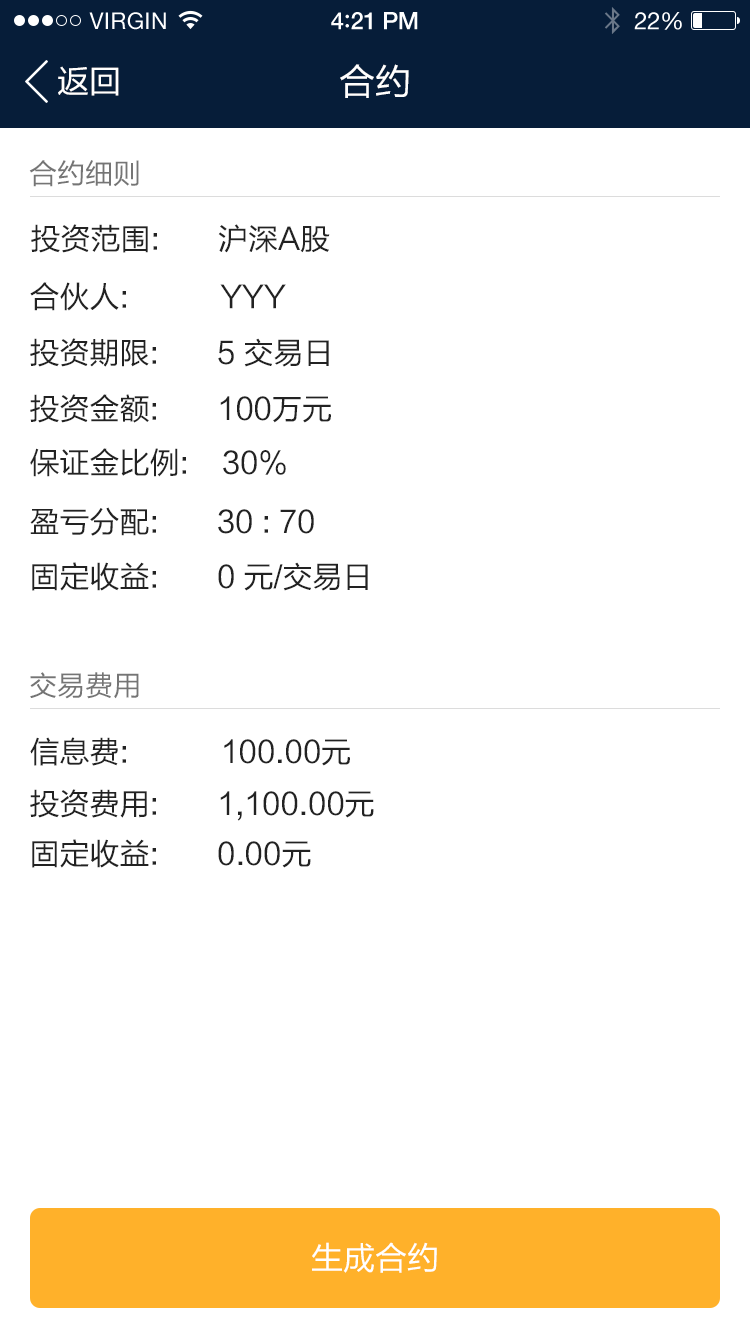
<style>
.page{position:relative;width:750px;height:1334px;background:#ffffff}
.page>*{position:absolute;margin:0}
.t1{font:36px "FZLTHK--GBK1-0";color:#ffffff}
.t2{font:32px "FZLTHK--GBK1-0";color:#ffffff}
.t3{font:28px "FZLTHK--GBK1-0";color:#757575}
.t4{font:30px "FZLTHK--GBK1-0";color:#222222}
</style>
<div class="page">
<p class="t1" style="left:340px;top:64px;width:69px;height:34px">合约</p>
<p class="t2" style="left:58px;top:66px;width:61px;height:30px">返回</p>
<p class="t3" style="left:29px;top:160px;width:110px;height:27px">合约细则</p>
<p class="t4" style="left:31px;top:224px;width:299px;height:29px">投资范围:       沪深A股</p>
<p class="t4" style="left:30px;top:282px;width:256px;height:29px">合伙人:           YYY</p>
<p class="t4" style="left:30px;top:338px;width:299px;height:29px">投资期限:       5 交易日</p>
<p class="t4" style="left:30px;top:394px;width:301px;height:29px">投资金额:       100万元</p>
<p class="t4" style="left:30px;top:448px;width:256px;height:29px">保证金比例:    30%</p>
<p class="t4" style="left:30px;top:507px;width:284px;height:29px">盈亏分配:       30 : 70</p>
<p class="t4" style="left:32px;top:562px;width:336px;height:29px">固定收益:       0 元/交易日</p>
<p class="t3" style="left:30px;top:672px;width:109px;height:27px">交易费用</p>
<p class="t4" style="left:30px;top:737px;width:320px;height:29px">信息费:           100.00元</p>
<p class="t4" style="left:30px;top:789px;width:344px;height:32px">投资费用:       1,100.00元</p>
<p class="t4" style="left:32px;top:839px;width:279px;height:29px">固定收益:       0.00元</p>
<p class="t2" style="left:312px;top:1242px;width:125px;height:31px">生成合约</p>
</div>
